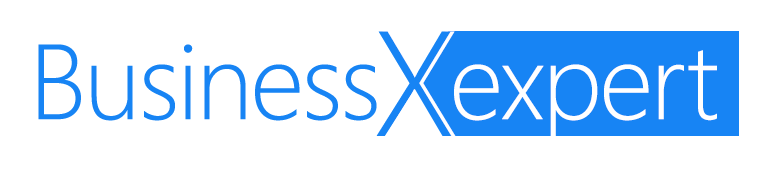
<style>
.page{position:relative;width:776px;height:178px;background:#ffffff}
.page>*{position:absolute;margin:0}
.t1{font:149px "SegoeUI-Light";letter-spacing:-0.025em;color:#1784f4}
.t2{font:106.2px "SegoeUI-Light";letter-spacing:-0.025em;color:#1784f4}
.t3{font:106.2px "SegoeUI-Light";letter-spacing:-0.025em;color:#ffffff}
</style>
<div class="page">
<p class="t1" style="left:376px;top:31px;width:76px;height:105px">X</p>
<p class="t2" style="left:38px;top:44px;width:339px;height:77px">Business</p>
<p class="t3" style="left:454px;top:50px;width:263px;height:94px">expert</p>
</div>
